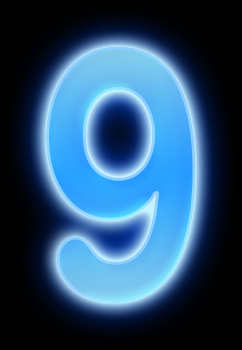
<style>
.page{position:relative;width:242px;height:350px}
.page>*{position:absolute;margin:0}
.t1{font:360px "AGBookRounded-Medium";letter-spacing:0.025em;scale:0.83 1}
</style>
<div class="page">
<p class="t1" style="left:46px;top:46px;width:150px;height:257px">9</p>
<p class="t1" style="left:46px;top:46px;width:150px;height:257px">9</p>
<p class="t1" style="left:46px;top:46px;width:150px;height:257px">9</p>
</div>
